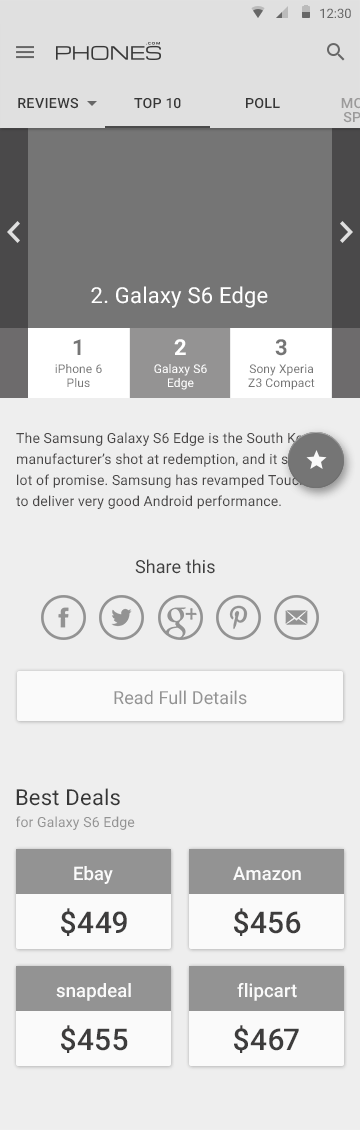
<style>
.page{position:relative;width:360px;height:1130px;background:#eeeeee}
.page>*{position:absolute;margin:0}
.t1{font:14px "Roboto-Medium";letter-spacing:0.01em;color:#373737}
.t2{font:22px "Roboto-Regular";letter-spacing:0.01em;color:#ffffff}
.t3{font:12px/18px "Roboto-Regular";letter-spacing:0.01em;color:#757575}
.t4{font:22px/24px "Roboto-Bold";letter-spacing:0.01em;color:#757575}
.t5{font:12px "Roboto-Regular";letter-spacing:0.01em;color:#757575}
.t6{font:12px/18px "Roboto-Regular";letter-spacing:0.01em;color:#ffffff}
.t7{font:22px/24px "Roboto-Bold";letter-spacing:0.01em;color:#ffffff}
.t8{font:12px "Roboto-Regular";letter-spacing:0.01em;color:#ffffff}
.t9{font:14px/21px "Roboto-Regular";letter-spacing:0.01em;color:#484646}
.t10{font:18px "Roboto-Regular";letter-spacing:0.005em;color:#3f3f3f}
.t11{font:18px "Roboto-Regular";letter-spacing:0.005em;color:#939393}
.t12{font:22px "Roboto-Regular";letter-spacing:0.01em;color:#373737}
.t13{font:14px "Roboto-Regular";letter-spacing:0.01em;color:#939393}
.t14{font:18.4px "Roboto-Medium";letter-spacing:0.01em;color:#fafafa}
.t15{font:30px "Roboto-Medium";letter-spacing:0.01em;color:#3d3c3c}
</style>
<div class="page">
<p class="t1" style="left:18px;top:98px;width:60px;height:11px">REVIEWS</p>
<p class="t1" style="left:134px;top:98px;width:47px;height:11px">TOP 10</p>
<p class="t1" style="left:246px;top:98px;width:34px;height:11px">POLL</p>
<p class="t2" style="left:91px;top:286px;width:177px;height:22px">2. Galaxy S6 Edge</p>
<p class="t3" style="left:55px;top:339px;width:47px;height:48px;text-align:center"><span class="t4">1<br></span>iPhone 6<br><span class="t5">Plus</span></p>
<p class="t6" style="left:154px;top:339px;width:53px;height:51px;text-align:center"><span class="t7">2<br></span>Galaxy S6<br><span class="t8">Edge</span></p>
<p class="t3" style="left:248px;top:339px;width:67px;height:51px;text-align:center"><span class="t4">3<br></span>Sony Xperia<br><span class="t5">Z3 Compact</span></p>
<p class="t9" style="left:16px;top:432px;width:317px;height:77px">The Samsung Galaxy S6 Edge is the South Korean manufacturer’s shot at redemption, and it shows a lot of promise. Samsung has revamped Touchwiz to deliver very good Android performance.</p>
<p class="t10" style="left:135px;top:559px;width:80px;height:15px">Share this</p>
<p class="t11" style="left:114px;top:690px;width:133px;height:15px">Read Full Details</p>
<p class="t12" style="left:16px;top:788px;width:104px;height:18px">Best Deals</p>
<p class="t13" style="left:16px;top:816px;width:119px;height:14px">for Galaxy S6 Edge</p>
<p class="t14" style="left:74px;top:866px;width:39px;height:18px">Ebay</p>
<p class="t14" style="left:233px;top:866px;width:68px;height:15px">Amazon</p>
<p class="t15" style="left:61px;top:908px;width:66px;height:28px">$449</p>
<p class="t15" style="left:234px;top:908px;width:67px;height:28px">$456</p>
<p class="t14" style="left:56px;top:983px;width:75px;height:18px">snapdeal</p>
<p class="t14" style="left:237px;top:983px;width:60px;height:18px">flipcart</p>
<p class="t15" style="left:61px;top:1025px;width:67px;height:28px">$455</p>
<p class="t15" style="left:234px;top:1025px;width:65px;height:28px">$467</p>
</div>
